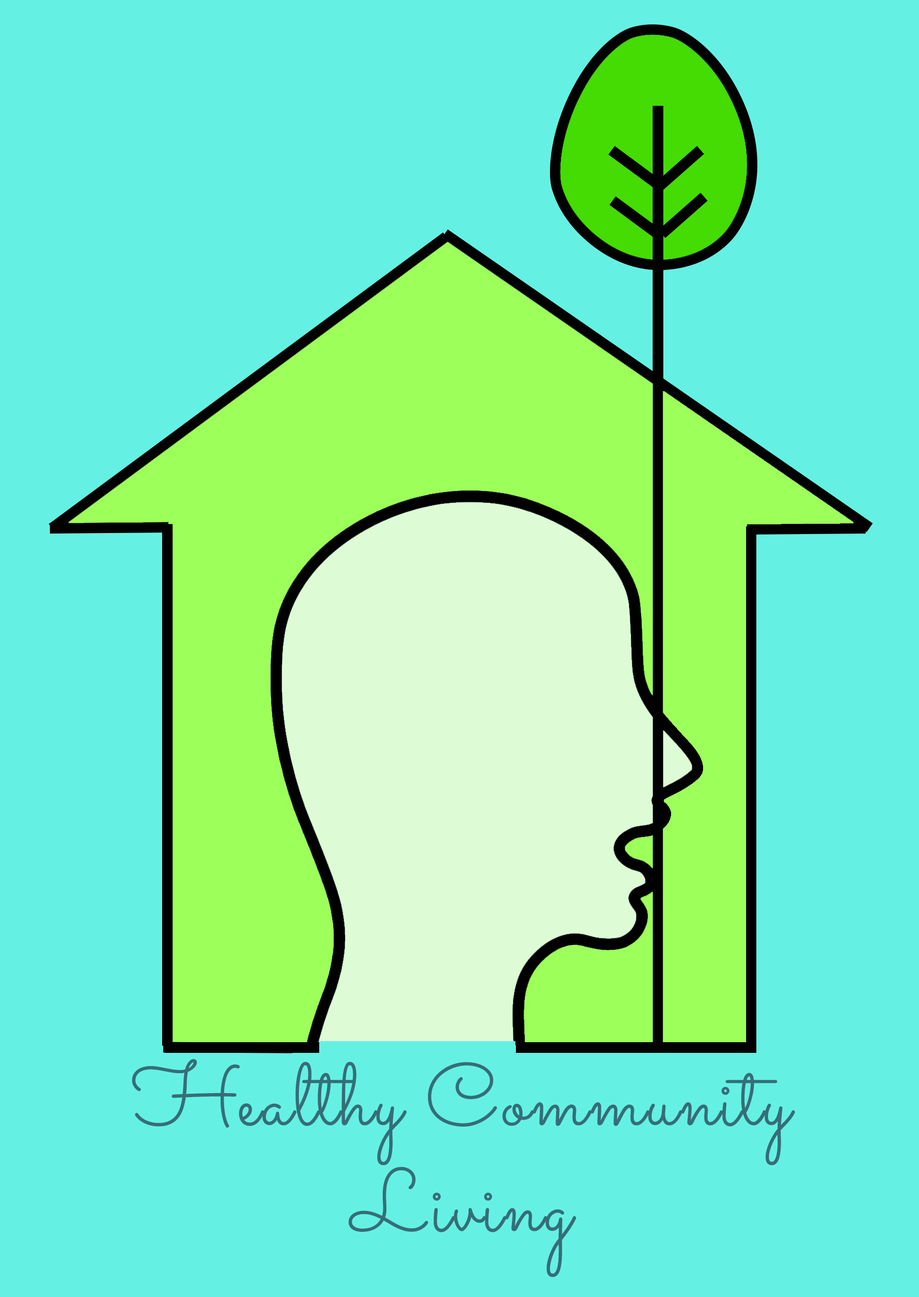
<style>
.page{position:relative;width:919px;height:1297px;background:#64f1e3}
.page>*{position:absolute;margin:0}
.t1{font:88px "Sacramento-Regular";letter-spacing:0.025em;color:#366d78}
</style>
<div class="page">
<p class="t1" style="left:132px;top:1059px;width:663px;height:218px;text-align:center">Healthy Community<br>Living</p>
</div>
